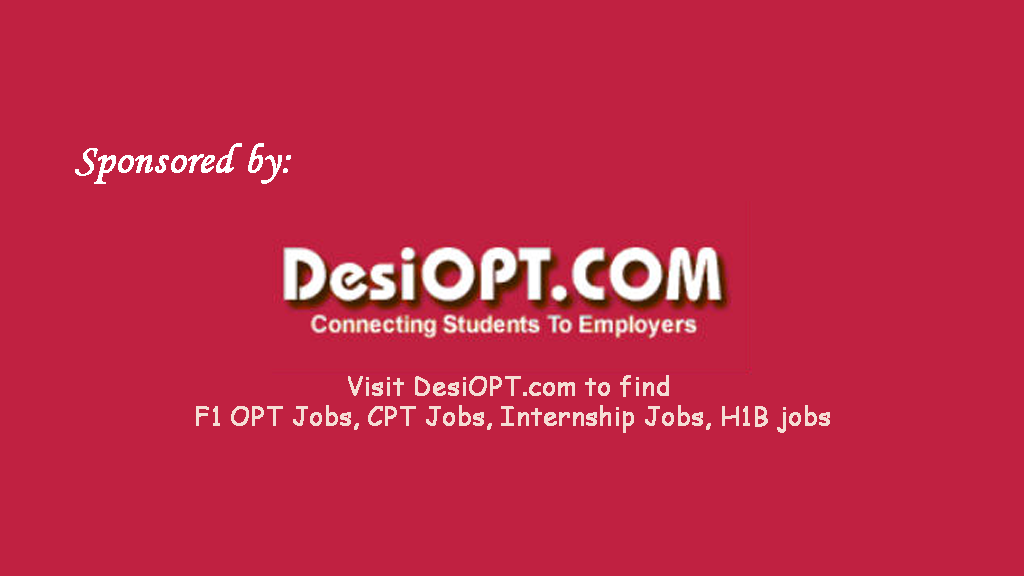
<style>
.page{position:relative;width:1024px;height:576px;background:#c02141}
.page>*{position:absolute;margin:0}
.t1{font:41.7px "MonotypeCorsiva";color:#ffffff;font-weight:bold}
.t2{font:25px "ComicSansMS";color:#f5ded5;font-weight:bold}
</style>
<div class="page">
<p class="t1" style="left:75px;top:143px;width:216px;height:41px">Sponsored by:</p>
<p class="t2" style="left:196px;top:375px;width:634px;height:58px;text-align:center">Visit DesiOPT.com to find <br>F1 OPT Jobs, CPT Jobs, Internship Jobs, H1B jobs</p>
</div>
